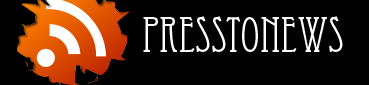
<style>
.page{position:relative;width:369px;height:85px;background:#000000}
.page>*{position:absolute;margin:0}
.t1{font:48px "EccentricStd";color:#ffffff}
.t2{font:36px "EccentricStd";color:#ffffff}
</style>
<div class="page">
<p class="t1" style="left:143px;top:16px;width:200px;height:36px"><span class="t2"> </span> presstonews</p>
</div>
